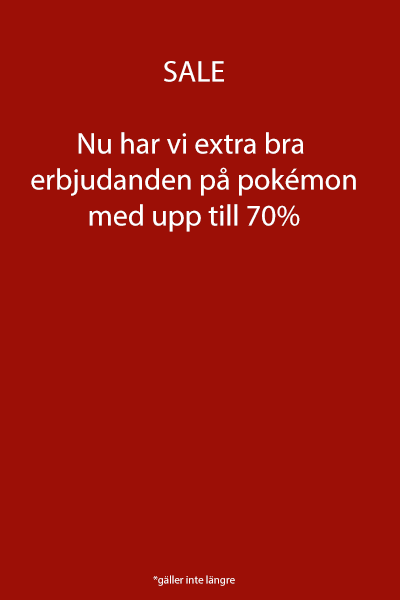
<style>
.page{position:relative;width:400px;height:600px;background:#9c0f06}
.page>*{position:absolute;margin:0}
.t1{font:30px "MyriadPro-Regular";color:#ffffff}
.t2{font:11px "MyriadPro-Regular";color:#ffffff}
</style>
<div class="page">
<p class="t1" style="left:31px;top:61px;width:325px;height:171px;text-align:center">SALE<br><br>Nu har vi extra bra <br>erbjudanden på pokémon<br>med upp till 70%</p>
<p class="t2" style="left:153px;top:575px;width:82px;height:11px">*gäller inte längre</p>
</div>
